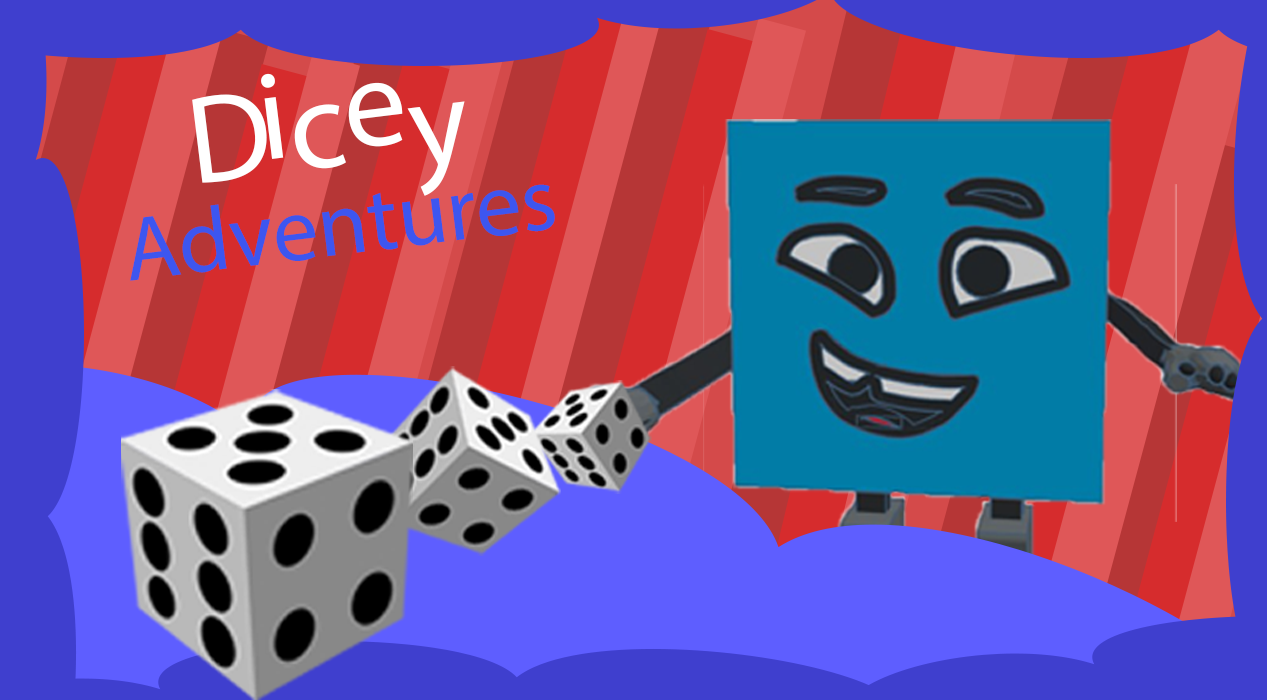
<style>
.page{position:relative;width:1267px;height:700px}
.page>*{position:absolute;margin:0}
.t1{font:125.7px "MyriadPro-Regular";color:#ffffff}
.t2{font:90.9px "MyriadPro-Regular";color:#3d56ef}
</style>
<div class="page">
<p class="t1" style="left:261px;top:73px;width:23px;height:86px;rotate:-7deg">i</p>
<p class="t1" style="left:348px;top:82px;width:55px;height:65px;rotate:-7deg">e</p>
<p class="t1" style="left:192px;top:94px;width:75px;height:89px;rotate:-7deg">D</p>
<p class="t1" style="left:407px;top:101px;width:58px;height:95px;rotate:-7deg">y</p>
<p class="t1" style="left:294px;top:104px;width:52px;height:65px;rotate:-7deg">c</p>
<p class="t2" style="left:130px;top:184px;width:425px;height:97px;rotate:-7deg">Adventuress</p>
</div>
